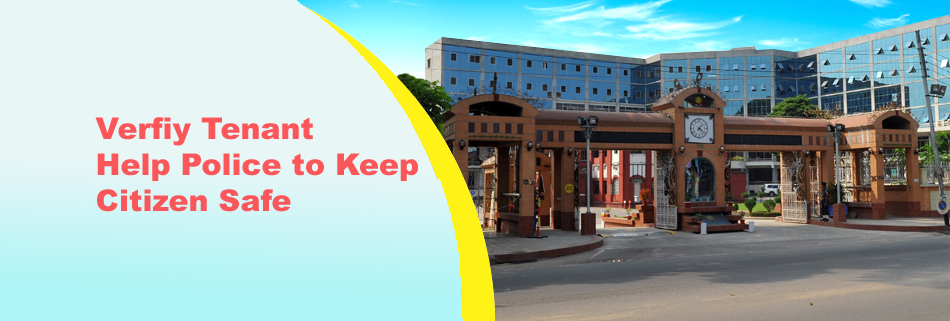
<style>
.page{position:relative;width:950px;height:321px}
.page>*{position:absolute;margin:0}
.t1{font:30px "Arial-Black";color:#fb575b}
</style>
<div class="page">
<p class="t1" style="left:95px;top:117px;width:323px;height:95px">Verfiy Tenant <br>Help Police to Keep<br>Citizen Safe</p>
</div>
